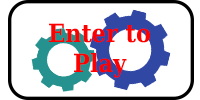
<style>
.page{position:relative;width:200px;height:100px;background:#ffffff}
.page>*{position:absolute;margin:0}
.t1{font:25px "DejaVuSerifCondensed-Bold";color:#ff0000}
</style>
<div class="page">
<p class="t1" style="left:49px;top:23px;width:101px;height:55px;text-align:center">Enter to<br>Play</p>
</div>
